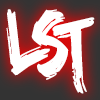
<style>
.page{position:relative;width:100px;height:100px;background:#ffffff}
.page>*{position:absolute;margin:0}
.t1{font:94.4px/8px "Edo";letter-spacing:-0.06em;color:#ffffff;scale:0.79 1}
.t2{font:94.4px/16px "Edo";letter-spacing:-0.06em;color:#ffffff;scale:0.79 1}
</style>
<div class="page">
<p class="t1" style="left:6px;top:9px;width:89px;height:85px;text-align:center;rotate:-10deg">l<br>   s<br><span class="t2">      t</span></p>
</div>
